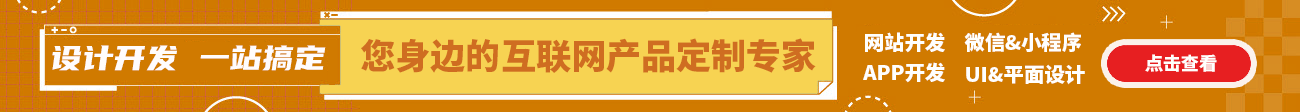
<style>
.page{position:relative;width:1300px;height:112px;background:#d07a00}
.page>*{position:absolute;margin:0}
.t1{font:35px "SourceHanSansCN-Heavy";color:#cf6d21}
.t2{font:20.3px "SourceHanSansCN-Heavy";color:#fffffd}
.t3{font:34.5px "YouSheBiaoTiHei";color:#fffcfc}
.t4{font:18px "SourceHanSansCN-Heavy";color:#fffffd}
</style>
<div class="page">
<p class="t1" style="left:361px;top:38px;width:455px;height:35px">您身边的互联网产品定制专家</p>
<p class="t2" style="left:865px;top:32px;width:80px;height:21px">网站开发</p>
<p class="t2" style="left:964px;top:32px;width:117px;height:20px">微信&amp;小程序</p>
<p class="t3" style="left:52px;top:45px;width:274px;height:26px">设计开发 一站搞定</p>
<p class="t4" style="left:1145px;top:54px;width:72px;height:18px">点击查看</p>
<p class="t2" style="left:863px;top:62px;width:82px;height:21px">APP开发</p>
<p class="t2" style="left:966px;top:64px;width:119px;height:21px">UI&amp;平面设计</p>
</div>
